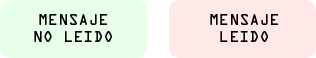
<style>
.page{position:relative;width:316px;height:58px;background:#ffe8e8}
.page>*{position:absolute;margin:0}
.t1{font:14px "OCRAStd";color:#000000}
</style>
<div class="page">
<p class="t1" style="left:34px;top:14px;width:78px;height:28px">MENSAJE<br>       NO LEIDO</p>
<p class="t1" style="left:210px;top:14px;width:69px;height:28px">MENSAJE<br> LEIDO</p>
</div>
